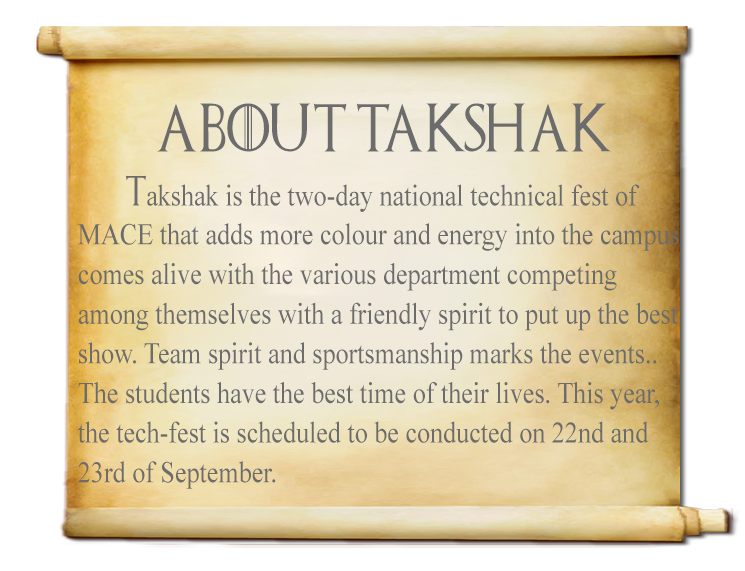
<style>
.page{position:relative;width:745px;height:571px;background:#ffffff}
.page>*{position:absolute;margin:0}
.t1{font:48px "GameofThrones";color:#6c6c6c;scale:0.87 1}
.t2{font:30px "TimesNewRomanPSMT";color:#6c6c6c;scale:0.87 1}
.t3{font:30px "GameofThrones";color:#6c6c6c;scale:0.87 1}
.t4{font:30px/39.6px "TimesNewRomanPSMT";color:#6c6c6c;scale:0.87 1}
</style>
<div class="page">
<p class="t1" style="left:157px;top:103px;width:454px;height:49px">About TAKSHAK</p>
<p class="t2" style="left:125px;top:175px;width:515px;height:37px"><span class="t3">T</span>akshak is the two-day national technical fest of</p>
<p class="t4" style="left:77px;top:223px;width:602px;height:266px">MACE that adds more colour and energy into the campus <br>comes alive with the various department competing<br>among themselves with a friendly spirit to put up the best<br>show. Team spirit and sportsmanship marks the events..<br>The students have the best time of their lives. This year,<br>the tech-fest is scheduled to be conducted on 22nd and<br>23rd of September.</p>
</div>
